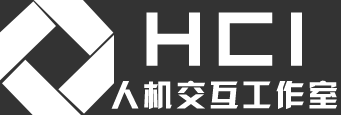
<style>
.page{position:relative;width:341px;height:115px;background:#333333}
.page>*{position:absolute;margin:0}
.t1{font:85px "imagine-font";letter-spacing:0.1em;color:#ffffff}
.t2{font:30px "HYk2gj";letter-spacing:0.1em;color:#ffffff}
</style>
<div class="page">
<p class="t1" style="left:146px;top:12px;width:156px;height:54px">HCI</p>
<p class="t2" style="left:111px;top:80px;width:226px;height:29px">人机交互工作室</p>
</div>
